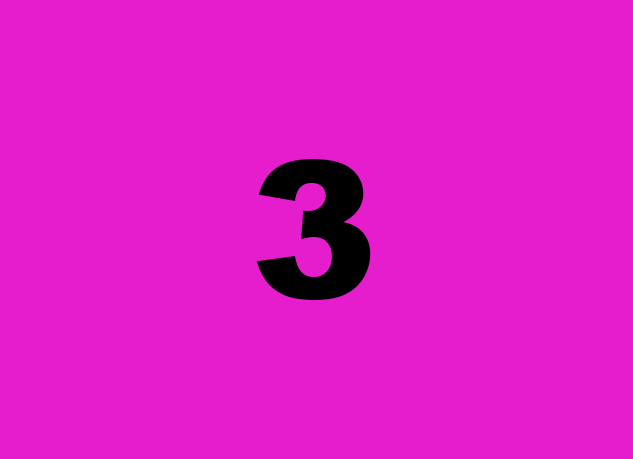
<style>
.page{position:relative;width:633px;height:459px;background:#e61dcc}
.page>*{position:absolute;margin:0}
.t1{font:192px "Arial-Black";color:#000000}
</style>
<div class="page">
<p class="t1" style="left:256px;top:159px;width:115px;height:141px">3</p>
</div>
